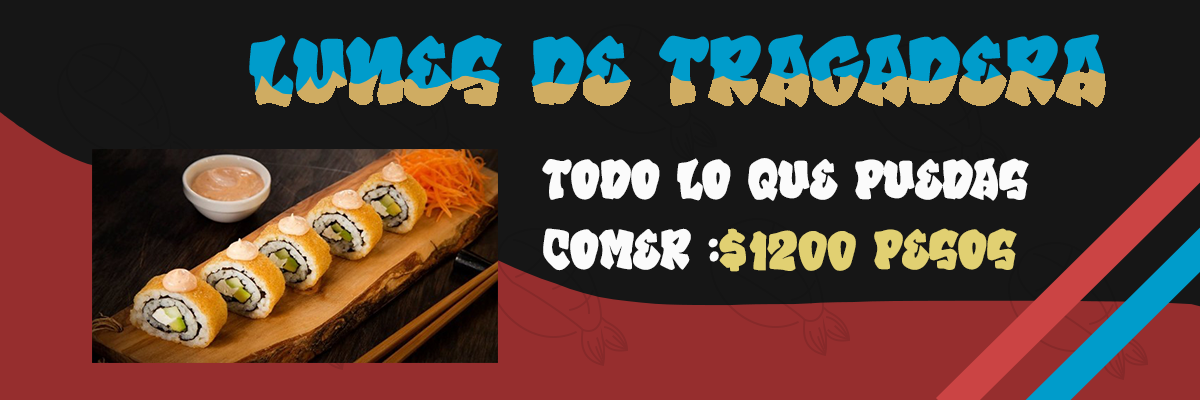
<style>
.page{position:relative;width:1200px;height:400px;background:#161616}
.page>*{position:absolute;margin:0}
.t1{font:58.3px "GrafiteRegular";color:#fbfbfb}
.t2{font:58.3px "GrafiteRegular";color:#e1d072}
</style>
<div class="page">
<p class="t1" style="left:542px;top:158px;width:487px;height:114px">todo lo que puedas<br>comer :<span class="t2">$1200 pesos</span></p>
</div>
